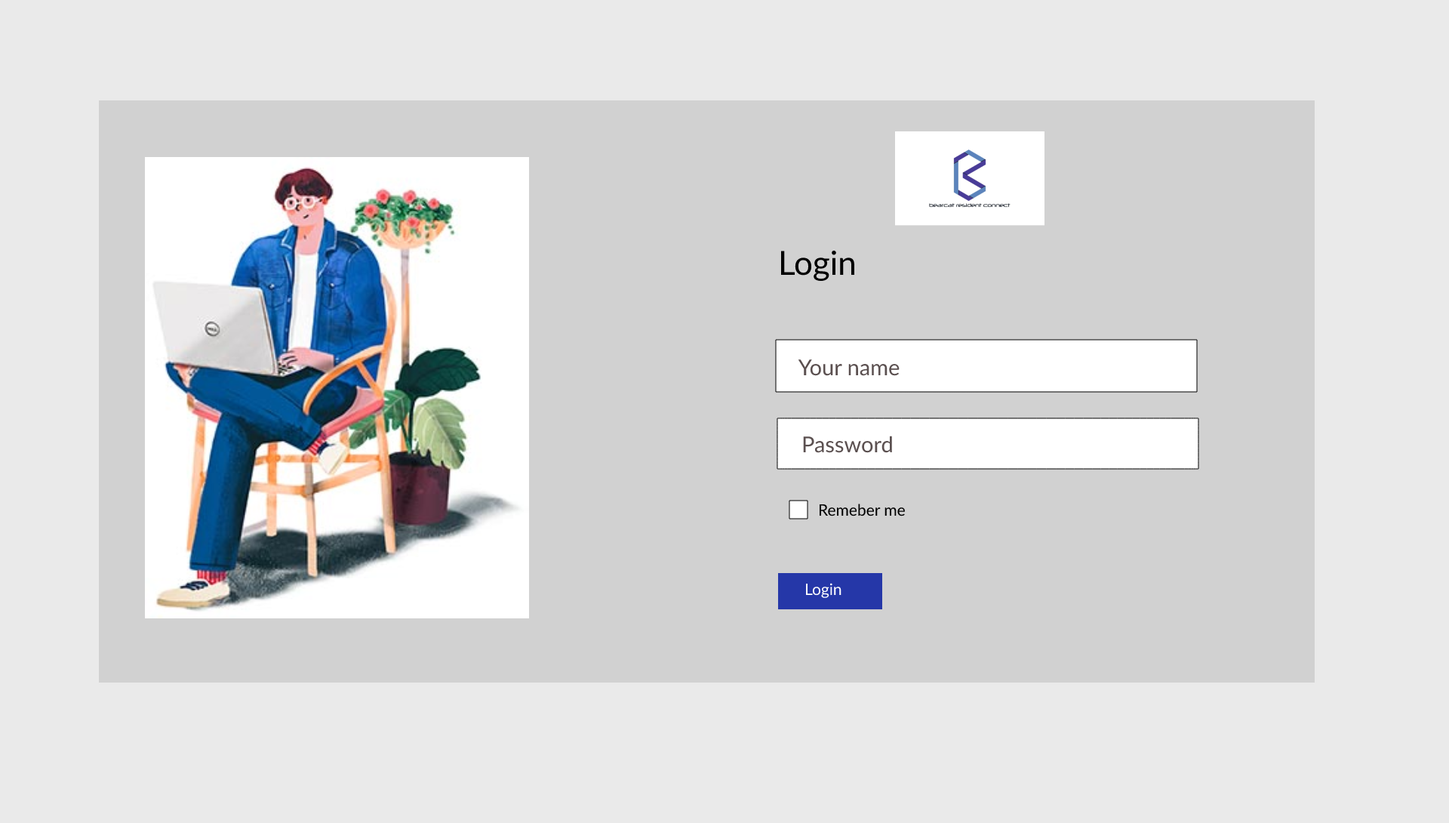
<style>
.page{position:relative;width:1449px;height:823px;background:#eaeaea}
.page>*{position:absolute;margin:0}
.t1{font:33.2px "Lato-Bold";color:#000000}
.t2{font:21.9px "Lato-Regular";color:#5b5050}
.t3{font:15.9px "Lato-Regular";color:#000000}
.t4{font:15.9px "Lato-Regular";color:#ffffff}
</style>
<div class="page">
<p class="t1" style="left:781px;top:250px;width:73px;height:32px">Login</p>
<p class="t2" style="left:798px;top:359px;width:102px;height:17px">Your name</p>
<p class="t2" style="left:803px;top:436px;width:89px;height:17px">Password</p>
<p class="t3" style="left:819px;top:503px;width:86px;height:13px">Remeber me</p>
<p class="t4" style="left:805px;top:583px;width:37px;height:15px">Login</p>
</div>
